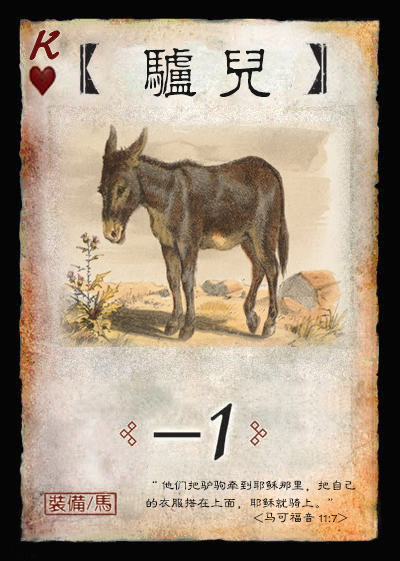
<style>
.page{position:relative;width:400px;height:561px}
.page>*{position:absolute;margin:0}
.t1{font:50px "Jxixinkai";color:#661213;font-weight:bold;font-style:italic}
.t2{font:60px "¾­µä·±½ÇÁ¥ Regular";letter-spacing:0.25em;color:#161616}
.t3{font:13px/17.5px "FZLBJW--GB1-0";color:#161616}
.t4{font:13px "FZLBJW--GB1-0";color:#161616}
</style>
<div class="page">
<p class="t1" style="left:30px;top:30px;width:30px;height:30px">K</p>
<p class="t2" style="left:143px;top:48px;width:128px;height:50px">驴儿</p>
<p class="t3" style="left:146px;top:480px;width:210px;height:29px">“ 他们把驴驹牵到耶稣那里，把自己<br>的衣服搭在上面，耶稣就骑上。”</p>
<p class="t4" style="left:253px;top:512px;width:95px;height:11px">&lt;马可福音 11:7&gt;</p>
</div>
